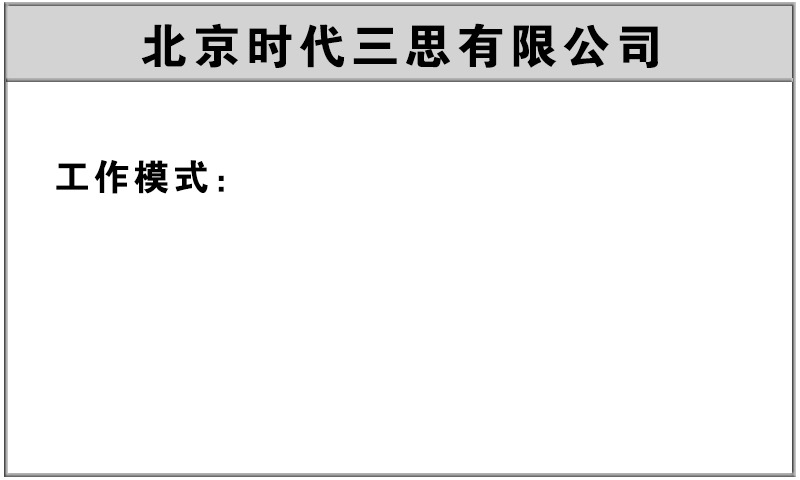
<style>
.page{position:relative;width:800px;height:480px;background:#ffffff}
.page>*{position:absolute;margin:0}
.t1{font:48px "FZDHTJW--GB1-0";letter-spacing:0.1em;color:#000000}
.t2{font:36px "FZDHTJW--GB1-0";letter-spacing:0.1em;color:#000000}
</style>
<div class="page">
<p class="t1" style="left:141px;top:23px;width:517px;height:45px">北京时代三思有限公司</p>
<p class="t2" style="left:56px;top:160px;width:168px;height:34px">工作模式：</p>
</div>
